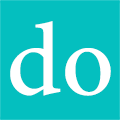
<style>
.page{position:relative;width:120px;height:120px;background:#04bfbf}
.page>*{position:absolute;margin:0}
.t1{font:101.1px "AdobeHebrew-Regular";color:#ffffff}
</style>
<div class="page">
<p class="t1" style="left:10px;top:21px;width:101px;height:75px">do</p>
</div>
